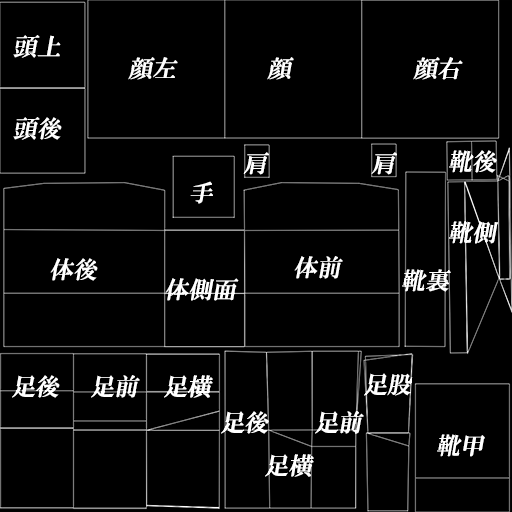
<style>
.page{position:relative;width:512px;height:512px;background:#000000}
.page>*{position:absolute;margin:0}
.t1{font:24px "HGPMinchoE";color:#ffffff;font-style:italic}
</style>
<div class="page">
<p class="t1" style="left:13px;top:35px;width:48px;height:23px">頭上</p>
<p class="t1" style="left:128px;top:57px;width:50px;height:23px">顔左</p>
<p class="t1" style="left:267px;top:57px;width:27px;height:23px">顔</p>
<p class="t1" style="left:413px;top:57px;width:50px;height:23px">顔右</p>
<p class="t1" style="left:13px;top:117px;width:49px;height:23px">頭後</p>
<p class="t1" style="left:449px;top:150px;width:48px;height:23px">靴後</p>
<p class="t1" style="left:243px;top:152px;width:26px;height:23px">肩</p>
<p class="t1" style="left:371px;top:152px;width:26px;height:23px">肩</p>
<p class="t1" style="left:190px;top:181px;width:23px;height:23px">手</p>
<p class="t1" style="left:449px;top:221px;width:49px;height:23px">靴側</p>
<p class="t1" style="left:294px;top:256px;width:49px;height:23px">体前</p>
<p class="t1" style="left:50px;top:258px;width:48px;height:23px">体後</p>
<p class="t1" style="left:402px;top:269px;width:49px;height:23px">靴裏</p>
<p class="t1" style="left:165px;top:278px;width:74px;height:23px">体側面</p>
<p class="t1" style="left:12px;top:375px;width:48px;height:23px">足後</p>
<p class="t1" style="left:91px;top:375px;width:49px;height:23px">足前</p>
<p class="t1" style="left:164px;top:375px;width:49px;height:23px">足横</p>
<p class="t1" style="left:364px;top:373px;width:49px;height:23px">足股</p>
<p class="t1" style="left:221px;top:411px;width:48px;height:23px">足後</p>
<p class="t1" style="left:315px;top:411px;width:49px;height:23px">足前</p>
<p class="t1" style="left:437px;top:434px;width:48px;height:23px">靴甲</p>
<p class="t1" style="left:265px;top:454px;width:49px;height:23px">足横</p>
</div>
